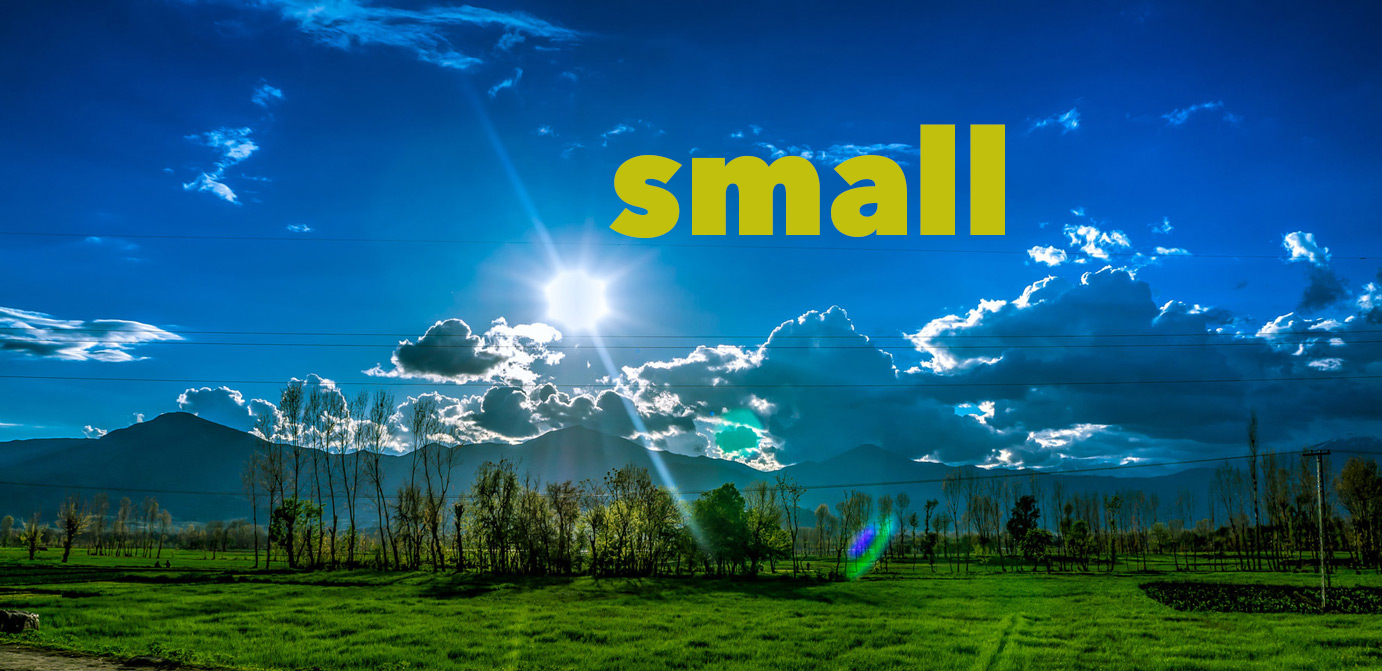
<style>
.page{position:relative;width:1382px;height:671px}
.page>*{position:absolute;margin:0}
.t1{font:146px "AvenirNextLTPro-Heavy";color:#c0c00d}
</style>
<div class="page">
<p class="t1" style="left:609px;top:124px;width:396px;height:115px">small</p>
</div>
